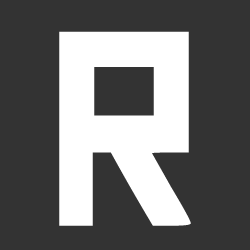
<style>
.page{position:relative;width:250px;height:250px;background:#333333}
.page>*{position:absolute;margin:0}
.t1{font:400px "RecinoStudio-Regular";color:#ffffff}
</style>
<div class="page">
<p class="t1" style="left:59px;top:31px;width:132px;height:195px">R</p>
</div>
